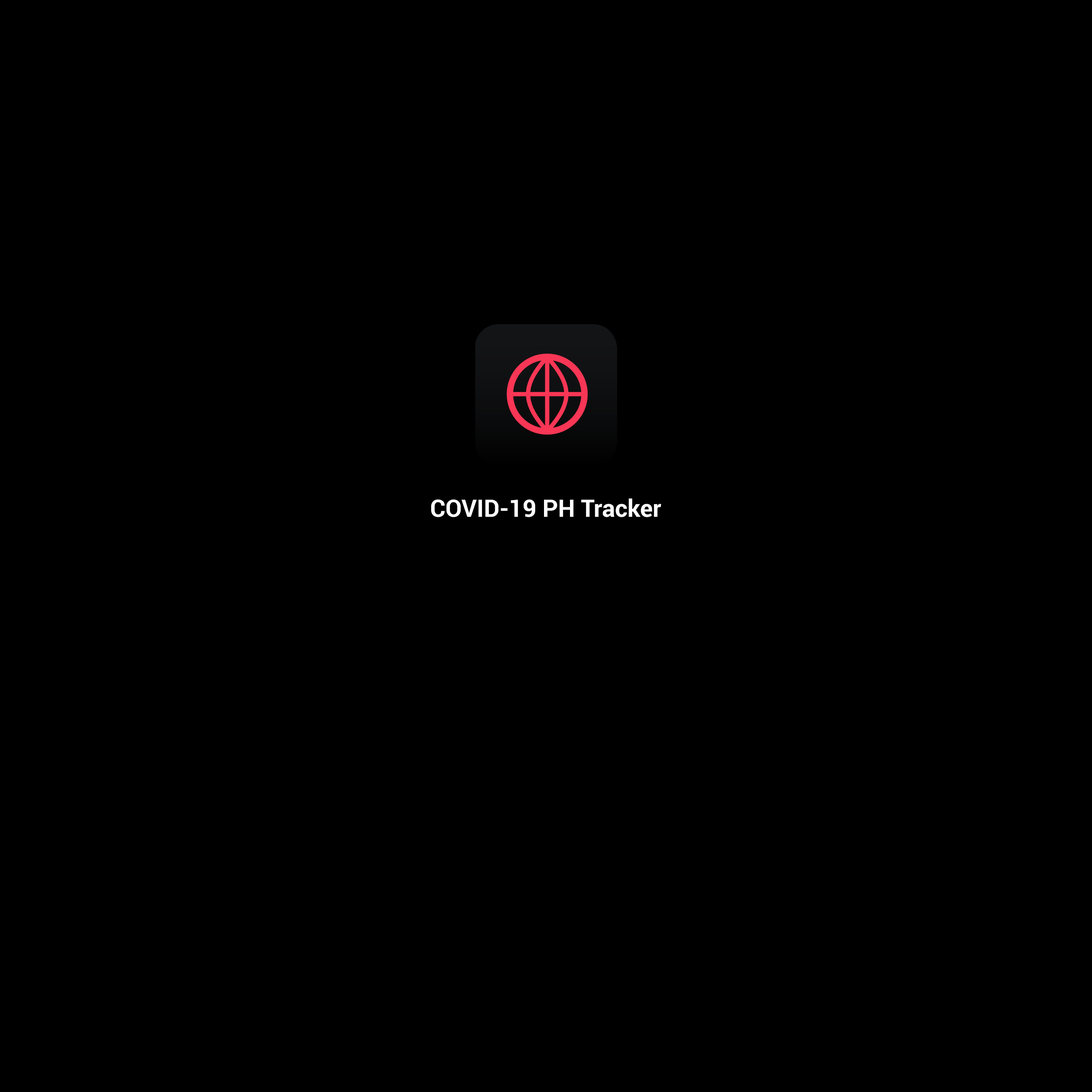
<style>
.page{position:relative;width:1092px;height:1092px;background:#000000}
.page>*{position:absolute;margin:0}
.t1{font:24px "Roboto-Bold";color:#ffffff}
</style>
<div class="page">
<p class="t1" style="left:431px;top:498px;width:230px;height:19px">COVID-19 PH Tracker</p>
</div>
